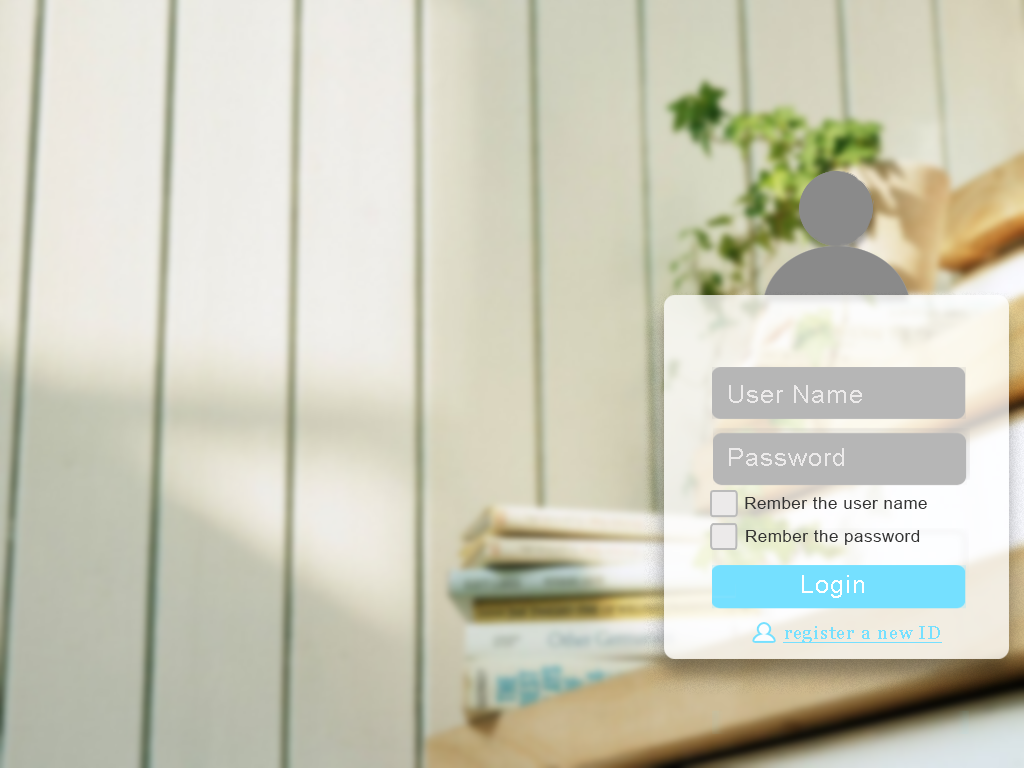
<style>
.page{position:relative;width:1024px;height:768px}
.page>*{position:absolute;margin:0}
.t1{font:25px "ArialMT";letter-spacing:0.04em;color:#eceaea}
.t2{font:25px "ArialMT";letter-spacing:0.04em;color:#eceaea;font-variant:small-caps}
.t3{font:16.7px "ArialMT";letter-spacing:0.04em;color:#333333}
.t4{font:25px "ArialMT";letter-spacing:0.04em;color:#ffffff}
.t5{font:19.4px "Georgia";letter-spacing:0.04em;color:#75e0ff;text-decoration:underline}
</style>
<div class="page">
<p class="t1" style="left:729px;top:385px;width:133px;height:18px"><span class="t2">U</span>ser Name</p>
<p class="t1" style="left:729px;top:448px;width:115px;height:18px"><span class="t2">P</span>assword</p>
<p class="t3" style="left:745px;top:497px;width:182px;height:12px">Rember the user name</p>
<p class="t3" style="left:746px;top:530px;width:174px;height:15px">Rember the password</p>
<p class="t4" style="left:802px;top:575px;width:62px;height:23px">Login</p>
<p class="t5" style="left:783px;top:626px;width:159px;height:17px">register a new ID</p>
</div>
